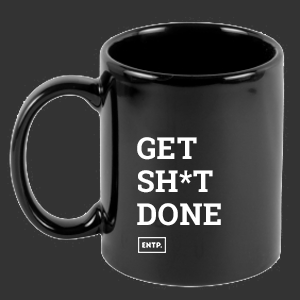
<style>
.page{position:relative;width:300px;height:300px;background:#333333}
.page>*{position:absolute;margin:0}
.t1{font:30px/33px "RobotoSlab-Bold";letter-spacing:0.02em;color:#ffffff}
</style>
<div class="page">
<p class="t1" style="left:137px;top:137px;width:84px;height:89px">GET<br>SH*T<br>DONE</p>
</div>
